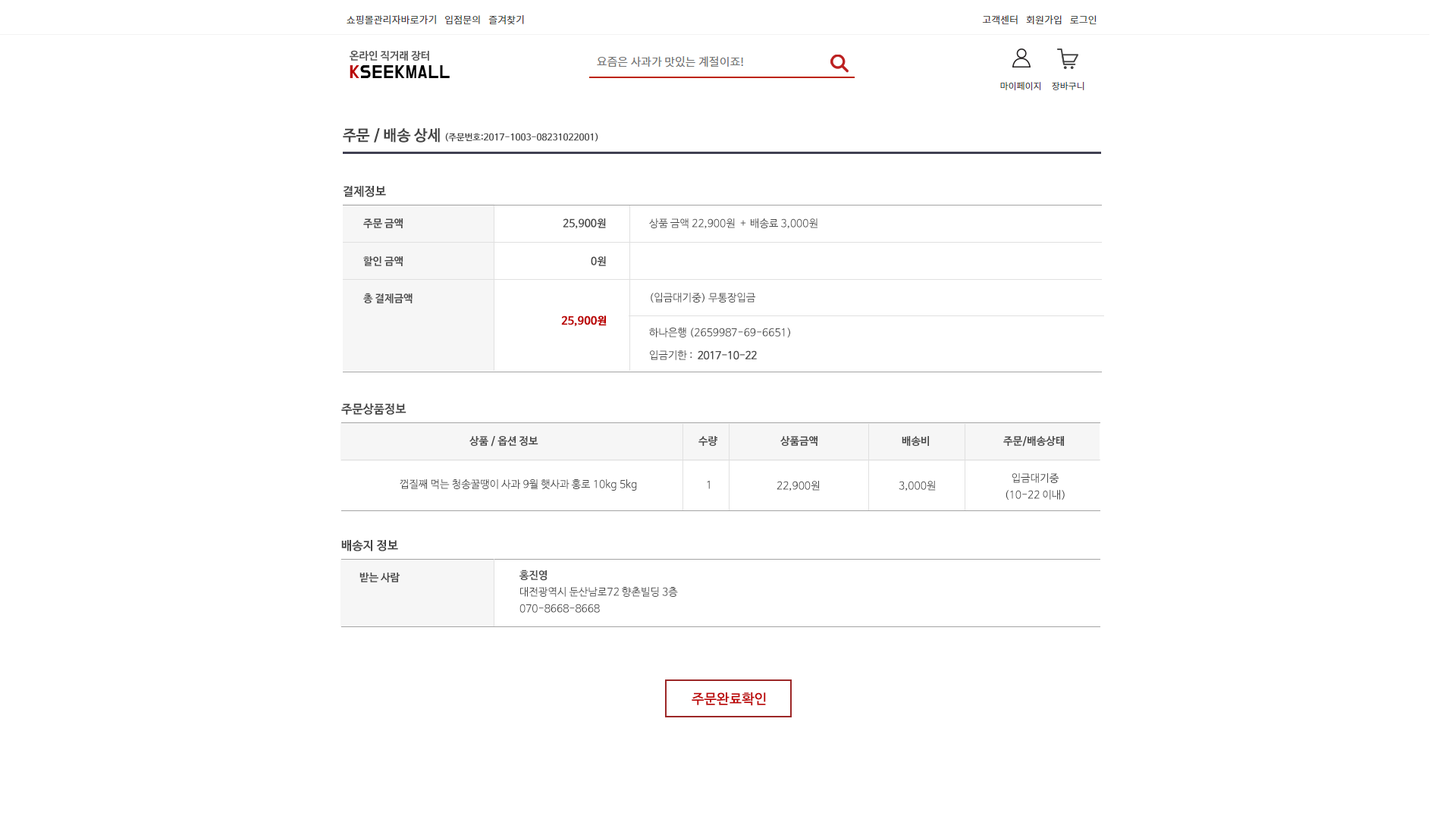
<style>
.page{position:relative;width:1456px;height:819px;background:#ffffff}
.page>*{position:absolute;margin:0}
.t1{font:9.1px "NanumBarunGothicBold";color:#434343}
.t2{font:15.2px "NanumBarunGothicBold";color:#434343}
.t3{font:12.1px "NanumBarunGothicBold";color:#434343}
.t4{font:10.6px "NanumBarunGothicBold";color:#494949}
.t5{font:10.6px "NanumBarunGothic";color:#494949}
.t6{font:10.6px "NanumBarunGothicBold";color:#bc0000;font-weight:bold}
.t7{font:10.6px "NanumBarunGothic";letter-spacing:-0.05em;color:#494949;font-weight:bold}
.t8{font:10.6px/16.7px "NanumBarunGothic";color:#494949}
.t9{font:10.6px "NanumBarunGothic"}
.t10{font:10.6px/16.7px "NanumBarunGothicBold";color:#494949}
.t11{font:13.6px "NanumBarunGothic";color:#bc0000;font-weight:bold}
</style>
<div class="page">
<p class="t1" style="left:343px;top:128px;width:255px;height:15px"><span class="t2">주문 / 배송 상세 </span>(주문번호:2017-1003-08231022001)</p>
<p class="t3" style="left:343px;top:186px;width:43px;height:11px">결제정보</p>
<p class="t4" style="left:363px;top:218px;width:40px;height:10px">주문 금액</p>
<p class="t4" style="left:563px;top:218px;width:43px;height:11px">25,900원</p>
<p class="t5" style="left:649px;top:218px;width:97px;height:11px">상품 금액 22,900원  +</p>
<p class="t5" style="left:751px;top:218px;width:66px;height:11px">배송료 3,000원</p>
<p class="t4" style="left:363px;top:256px;width:40px;height:10px">할인 금액</p>
<p class="t4" style="left:591px;top:256px;width:15px;height:10px">0원</p>
<p class="t4" style="left:363px;top:293px;width:50px;height:10px">총 결제금액</p>
<p class="t5" style="left:651px;top:293px;width:104px;height:10px">(입금대기중) 무통장입금</p>
<p class="t6" style="left:561px;top:315px;width:46px;height:11px">25,900원</p>
<p class="t5" style="left:649px;top:328px;width:141px;height:9px">하나은행 (2659987-69-6651)</p>
<p class="t7" style="left:650px;top:350px;width:107px;height:10px"><span class="t5">입금기한 :  </span>2017-10-22</p>
<p class="t3" style="left:341px;top:403px;width:65px;height:12px">주문상품정보</p>
<p class="t4" style="left:469px;top:436px;width:69px;height:11px">상품 / 옵션 정보</p>
<p class="t4" style="left:698px;top:436px;width:19px;height:10px">수량</p>
<p class="t4" style="left:780px;top:436px;width:37px;height:10px">상품금액</p>
<p class="t4" style="left:902px;top:436px;width:27px;height:10px">배송비</p>
<p class="t4" style="left:1003px;top:436px;width:61px;height:11px">주문/배송상태</p>
<p class="t8" style="left:1006px;top:473px;width:59px;height:27px;text-align:center">입금대기중<br>(10-22 이내)</p>
<p class="t5" style="left:400px;top:479px;width:237px;height:12px">껍질째 먹는 청송꿀땡이 사과 9월 햇사과 홍로 10kg 5kg</p>
<p class="t9" style="left:707px;top:481px;width:3px;height:8px">1</p>
<p class="t5" style="left:777px;top:481px;width:43px;height:10px">22,900원</p>
<p class="t5" style="left:899px;top:481px;width:37px;height:10px">3,000원</p>
<p class="t3" style="left:341px;top:540px;width:57px;height:11px">배송지 정보</p>
<p class="t8" style="left:519px;top:570px;width:159px;height:43px"><span class="t10">홍진영<br></span>대전광역시 둔산남로72 향촌빌딩 3층<br>070-8668-8668</p>
<p class="t4" style="left:359px;top:573px;width:41px;height:9px">받는 사람</p>
<p class="t11" style="left:692px;top:692px;width:74px;height:14px">주문완료확인</p>
</div>
